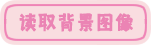
<style>
.page{position:relative;width:151px;height:45px;background:#f9dde0}
.page>*{position:absolute;margin:0}
.t1{font:12px "shetumodengxiaofangti";color:#eb84b4;font-weight:bold;scale:0.94 1}
</style>
<div class="page">
<p class="t1" style="left:19px;top:13px;width:114px;height:19px">读取背景图像</p>
</div>
